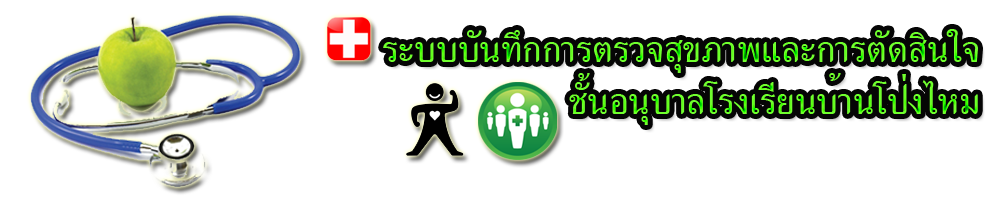
<style>
.page{position:relative;width:1000px;height:200px;background:#ffffff}
.page>*{position:absolute;margin:0}
.t1{font:48.6px "EucrosiaDSE";color:#70ff2e}
.t2{font:48.6px "EucrosiaDSE"}
</style>
<div class="page">
<p class="t1" style="left:383px;top:29px;width:595px;height:44px">ระบบบันทึกการตรวจสุขภาพและการตัดสินใจ</p>
<p class="t2" style="left:569px;top:73px;width:409px;height:52px">ชั้นอนุบาลโรงเรียนบ้านโป่งไหม</p>
</div>
